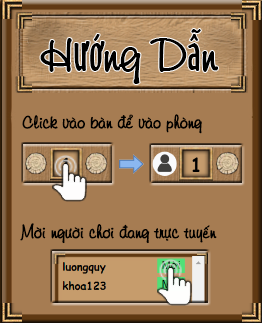
<style>
.page{position:relative;width:262px;height:323px;background:#a67c52}
.page>*{position:absolute;margin:0}
.t1{font:48px "VNI-Diudang";color:#000000}
.t2{font:48px "UVNBanTay";color:#000000}
.t3{font:18px "VNI-Diudang";color:#000000}
</style>
<div class="page">
<p class="t1" style="left:40px;top:29px;width:179px;height:55px">H<span class="t2">ướ</span>ng D<span class="t2">ẫ</span>n</p>
<p class="t3" style="left:22px;top:114px;width:180px;height:20px">Click vaøo baøn ñeå vaøo phoøng</p>
<p class="t3" style="left:20px;top:223px;width:197px;height:21px">Môøi ngöôøi chôi ñang tröïc tuyeán</p>
</div>
